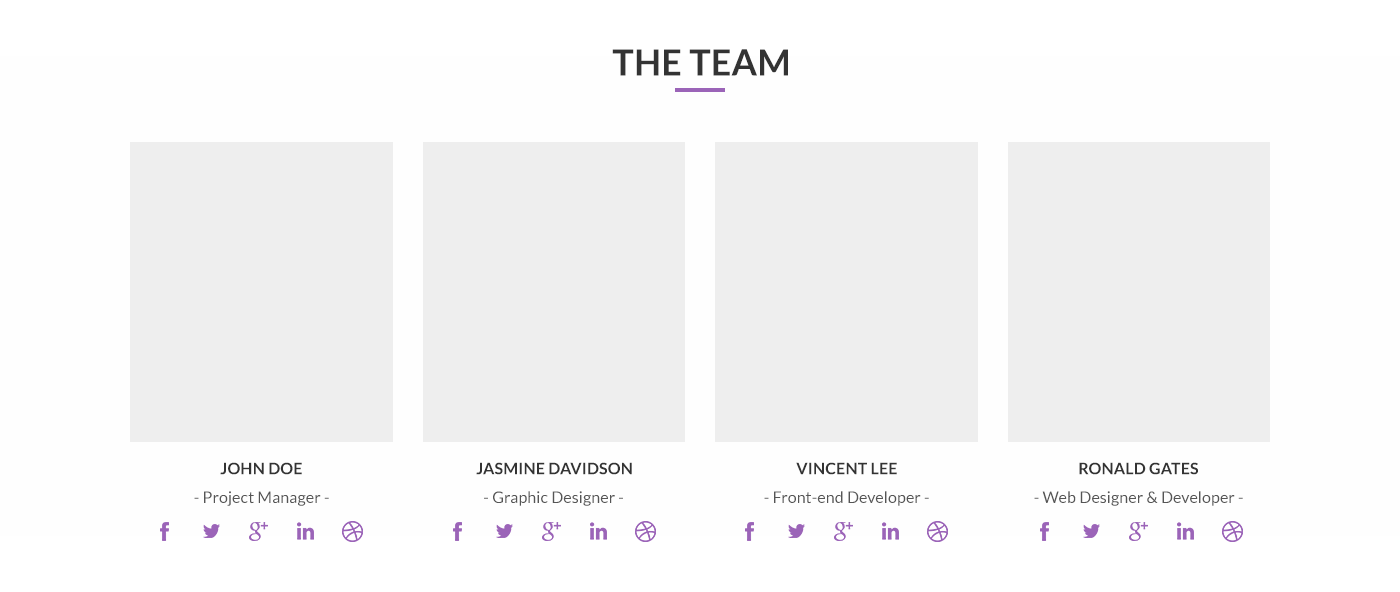
<style>
.page{position:relative;width:1400px;height:592px;background:#fefefe}
.page>*{position:absolute;margin:0}
.t1{font:36px "Lato-Bold";letter-spacing:0.005em;color:#333333}
.t2{font:16px "Lato-Bold";letter-spacing:0.01em;color:#333333}
.t3{font:16px "Lato-Regular";letter-spacing:0.005em;color:#555555}
</style>
<div class="page">
<p class="t1" style="left:612px;top:49px;width:176px;height:27px">THE TEAM</p>
<p class="t2" style="left:220px;top:462px;width:82px;height:13px">JOHN DOE</p>
<p class="t2" style="left:476px;top:462px;width:156px;height:13px">JASMINE DAVIDSON</p>
<p class="t2" style="left:796px;top:462px;width:101px;height:13px">VINCENT LEE</p>
<p class="t2" style="left:1079px;top:462px;width:119px;height:13px">RONALD GATES</p>
<p class="t3" style="left:194px;top:491px;width:135px;height:15px">- Project Manager -</p>
<p class="t3" style="left:484px;top:491px;width:139px;height:15px">- Graphic Designer -</p>
<p class="t3" style="left:764px;top:491px;width:165px;height:15px">- Front-end Developer -</p>
<p class="t3" style="left:1034px;top:491px;width:209px;height:15px">- Web Designer &amp; Developer -</p>
</div>
